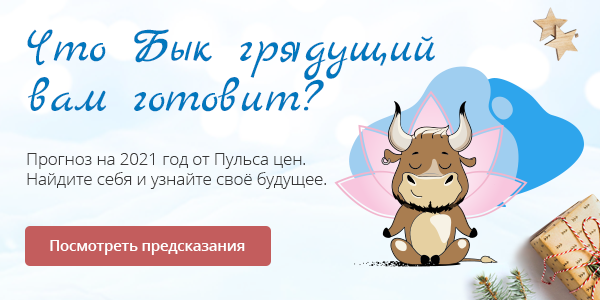
<style>
.page{position:relative;width:600px;height:300px}
.page>*{position:absolute;margin:0}
.t1{font:49.1px/50px "MarckScript-Regular";color:#0277bd}
.t2{font:16.7px "OpenSans-Light";color:#393838}
.t3{font:14.6px "OpenSans-SemiBold";color:#ffffff}
</style>
<div class="page">
<p class="t1" style="left:27px;top:29px;width:408px;height:83px">Что Бык грядущий<br>вам готовит?</p>
<p class="t2" style="left:27px;top:153px;width:299px;height:36px">Прогноз на 2021 год от Пульса цен.<br>Найдите себя и узнайте своё будущее.</p>
<p class="t3" style="left:50px;top:240px;width:195px;height:15px">Посмотреть предсказания</p>
</div>
